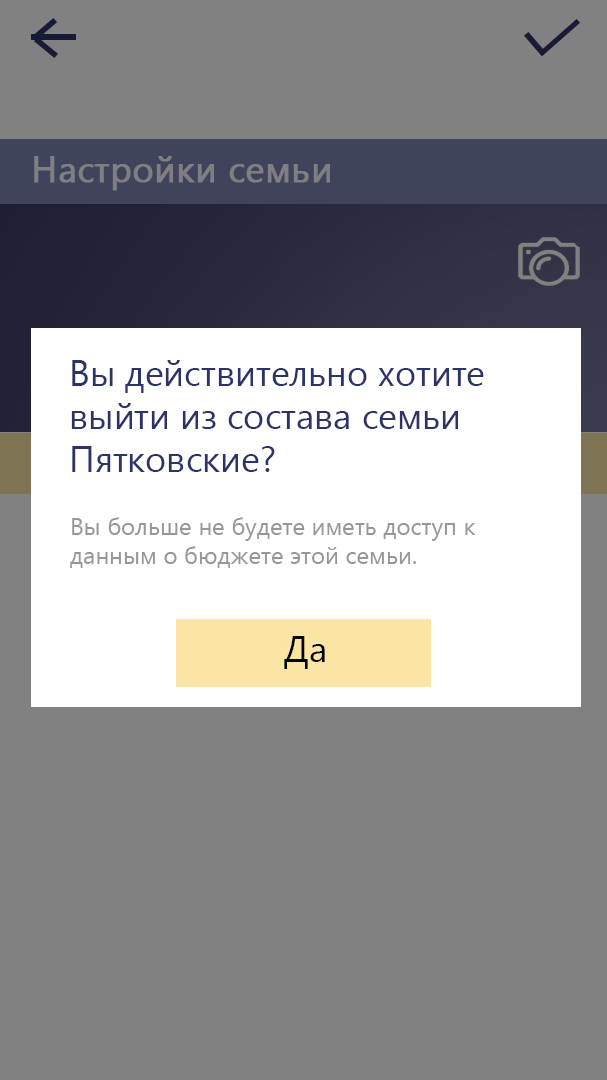
<style>
.page{position:relative;width:607px;height:1080px;background:#818181}
.page>*{position:absolute;margin:0}
.t1{font:36px "YuGothicUI-Regular";color:#7f7f81;font-weight:bold}
.t2{font:36px "YuGothicUI-Regular";color:#2b3368}
.t3{font:24px "YuGothicUI-Regular";color:#96979c}
.t4{font:36px "YuGothicUI-Regular";color:#010101}
</style>
<div class="page">
<p class="t1" style="left:34px;top:156px;width:296px;height:35px">Настройки семьи</p>
<p class="t2" style="left:71px;top:360px;width:413px;height:112px">Вы действительно хотите<br>выйти из состава семьи<br>Пятковские?</p>
<p class="t3" style="left:70px;top:517px;width:406px;height:51px">Вы больше не будете иметь доступ к <br>данным о бюджете этой семьи.</p>
<p class="t4" style="left:284px;top:636px;width:41px;height:33px">Да</p>
</div>
